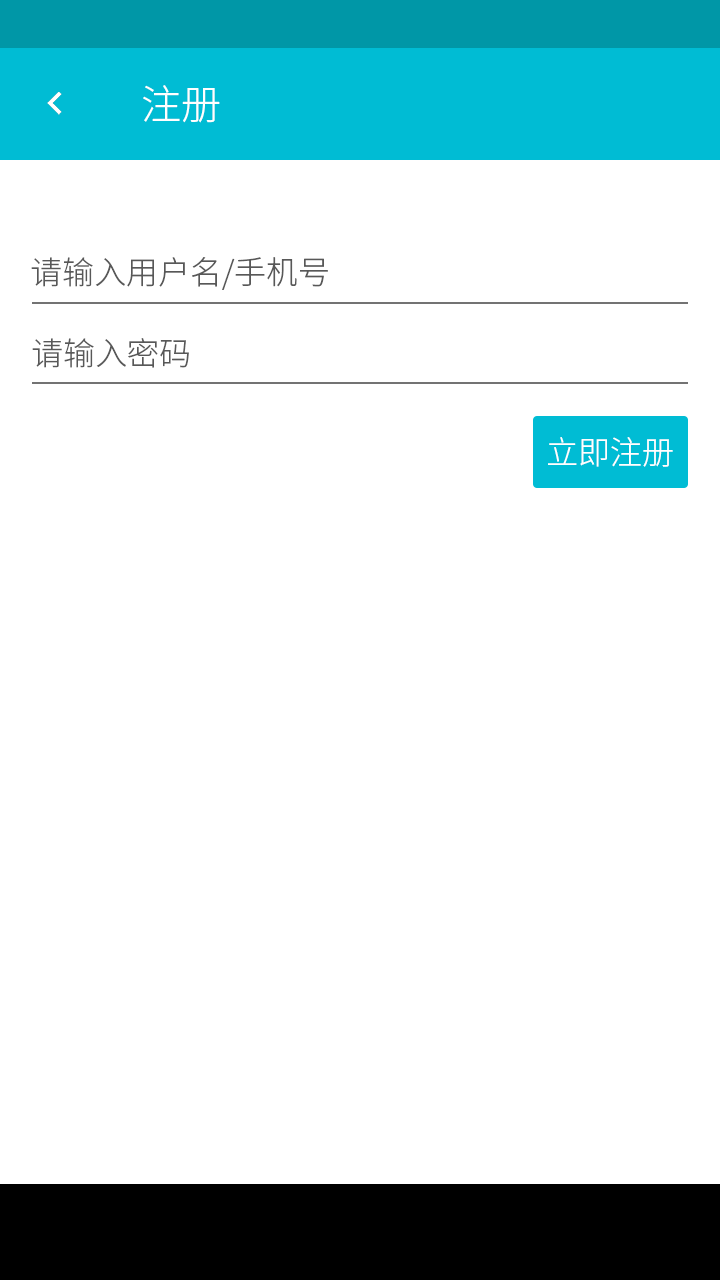
<style>
.page{position:relative;width:720px;height:1280px;background:#ffffff}
.page>*{position:absolute;margin:0}
.t1{font:40px "SourceHanSansCN-Light";color:#ffffff}
.t2{font:32px "SourceHanSansCN-Light";color:#585858}
.t3{font:32px "SourceHanSansCN-Light";color:#ffffff}
</style>
<div class="page">
<p class="t1" style="left:143px;top:85px;width:77px;height:38px">注册</p>
<p class="t2" style="left:31px;top:257px;width:297px;height:33px">请输入用户名/手机号</p>
<p class="t2" style="left:32px;top:338px;width:157px;height:30px">请输入密码</p>
<p class="t3" style="left:548px;top:437px;width:125px;height:30px">立即注册</p>
</div>
